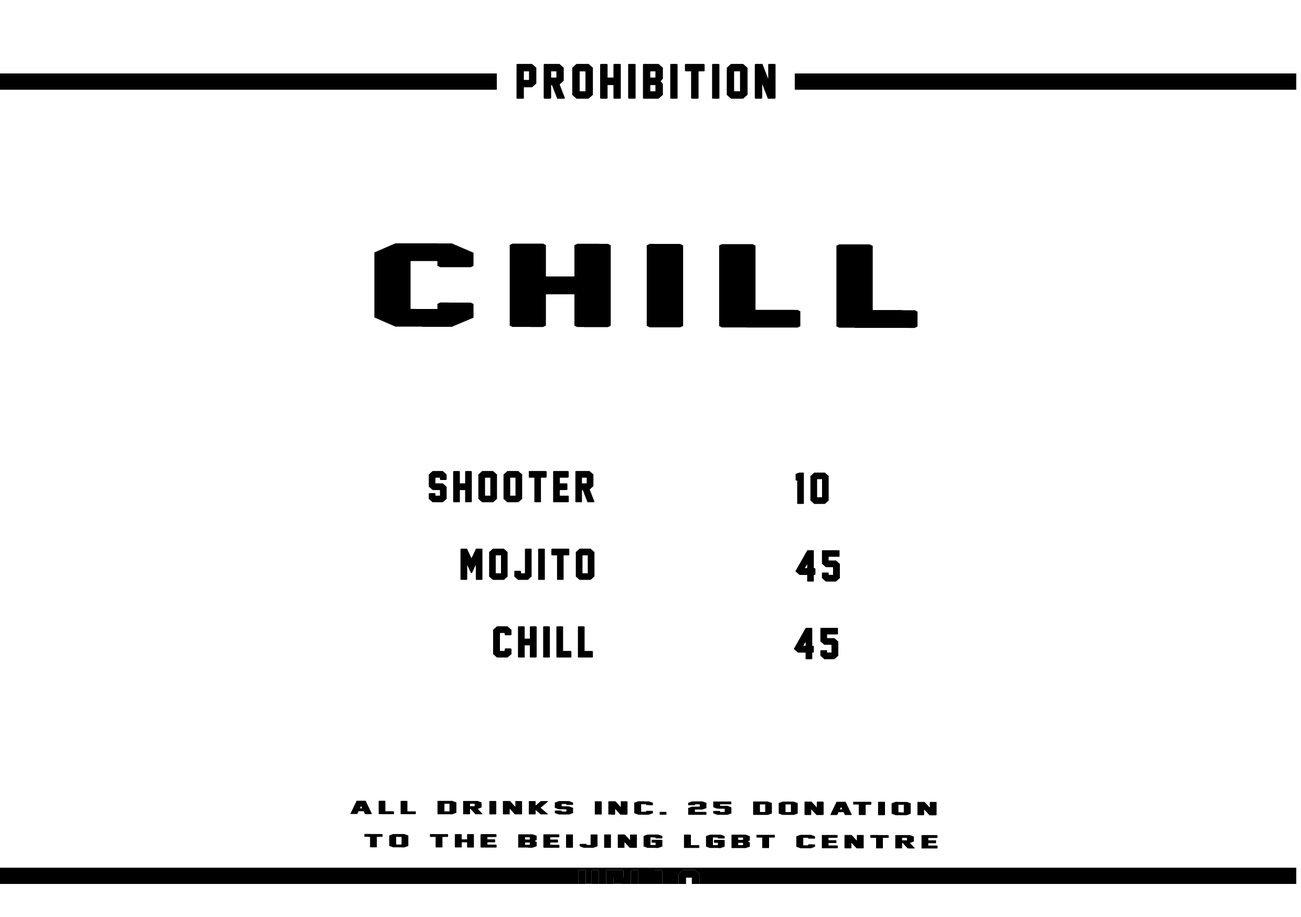
<style>
.page{position:relative;width:1301px;height:917px;background:#ffffff}
.page>*{position:absolute;margin:0}
.t1{font:43.7px "JerseyM54";letter-spacing:0.1em;color:#000000;font-weight:bold}
.t2{font:104.9px "JerseyM54";letter-spacing:0.1em;color:#000000;font-weight:bold;scale:2.04 1}
.t3{font:39.3px "JerseyM54";letter-spacing:0.1em;color:#000000;font-weight:bold}
.t4{font:39.6px "JerseyM54";letter-spacing:0.1em;color:#000000;font-weight:bold}
.t5{font:16.8px/33.2px "JerseyM54";letter-spacing:0.1em;color:#000000;font-weight:bold;scale:2.4 1}
</style>
<div class="page">
<p class="t1" style="left:516px;top:63px;width:260px;height:36px">prohibition</p>
<p class="t2" style="left:374px;top:243px;width:543px;height:85px">chill</p>
<p class="t3" style="left:428px;top:470px;width:166px;height:32px">shooter</p>
<p class="t4" style="left:795px;top:472px;width:34px;height:32px">10</p>
<p class="t3" style="left:460px;top:548px;width:135px;height:32px">mojito</p>
<p class="t4" style="left:795px;top:550px;width:45px;height:32px">45</p>
<p class="t3" style="left:493px;top:626px;width:100px;height:32px">chill</p>
<p class="t4" style="left:794px;top:627px;width:44px;height:32px">45</p>
<p class="t5" style="left:350px;top:800px;width:588px;height:49px;text-align:center">all drinks inc. 25 donation<br> to the beijing lgbt centre</p>
</div>
